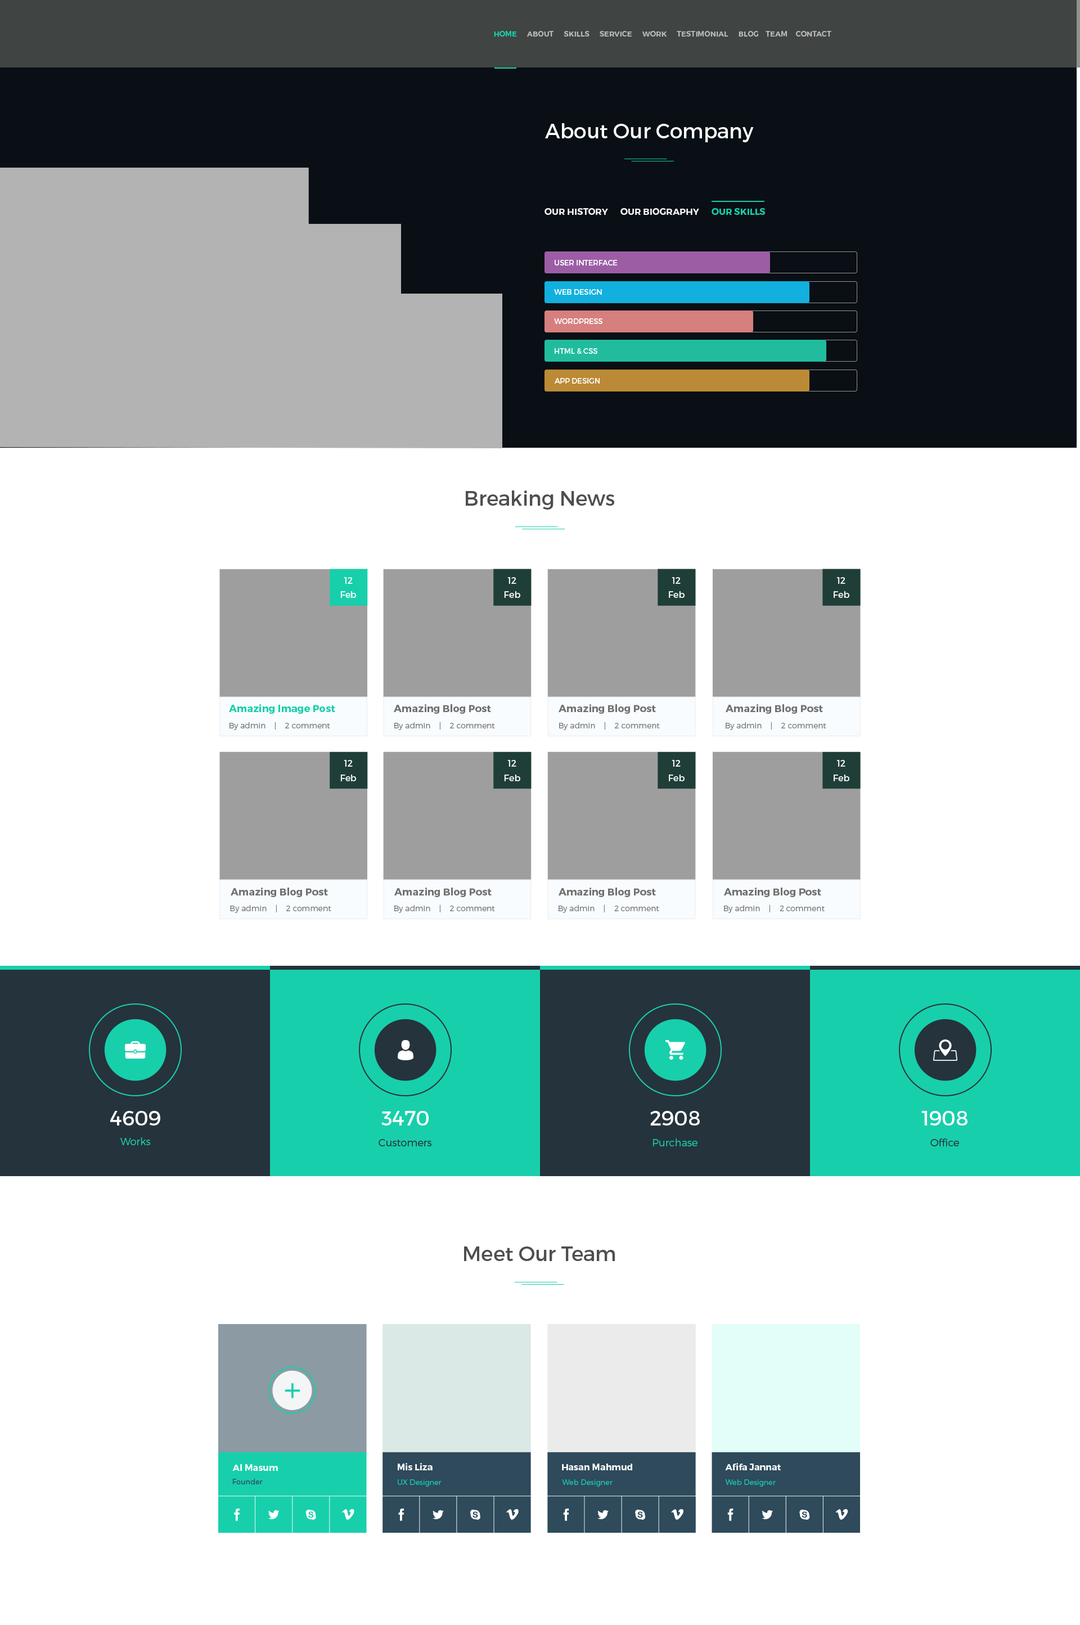
<style>
.page{position:relative;width:1080px;height:1625px;background:#ffffff}
.page>*{position:absolute;margin:0}
.t1{font:7.3px "Montserrat-Bold";color:#b8b8b8;text-transform:uppercase}
.t2{font:7.3px "Montserrat-Bold";color:#18cfab;text-transform:uppercase}
.t3{font:20.2px "Montserrat-Regular";color:#ffffff}
.t4{font:9px "Montserrat-Bold";color:#f5f5f5;text-transform:uppercase}
.t5{font:9px "Montserrat-Bold";color:#18cfab;text-transform:uppercase}
.t6{font:7.3px "Montserrat-Regular";color:#ffffff;text-transform:uppercase}
.t7{font:20.2px "Montserrat-Regular";color:#4e4e4e}
.t8{font:9px/14.2px "Montserrat-Regular";color:#ffffff}
.t9{font:10.1px "Montserrat-Bold";color:#18cfab}
.t10{font:10.1px "Montserrat-Bold";color:#717171}
.t11{font:7.9px "Montserrat-Light";color:#777777}
.t12{font:20.2px "Montserrat-Regular";color:#ffffff;text-transform:uppercase}
.t13{font:10.1px "Montserrat-Light";color:#18cfab}
.t14{font:10.1px "Montserrat-Light";color:#25333c}
.t15{font:9px "Montserrat-Bold";color:#ffffff}
.t16{font:7.3px "Montserrat-Light";color:#2e4a5b}
.t17{font:7.3px "Montserrat-Light";color:#18cfab}
</style>
<div class="page">
<p class="t1" style="left:494px;top:31px;width:337px;height:6px"><span class="t2">home      </span>about      skills      service      work      testimonial      blog    team     contact</p>
<p class="t3" style="left:545px;top:123px;width:209px;height:19px">About Our Company</p>
<p class="t4" style="left:544px;top:208px;width:221px;height:7px">our History      our Biography      <span class="t5">our Skills</span></p>
<p class="t6" style="left:555px;top:260px;width:63px;height:5px">User Interface</p>
<p class="t6" style="left:554px;top:289px;width:48px;height:6px">Web Design</p>
<p class="t6" style="left:554px;top:318px;width:48px;height:6px">Wordpress</p>
<p class="t6" style="left:555px;top:348px;width:42px;height:6px">HTML &amp; CSS</p>
<p class="t6" style="left:555px;top:378px;width:45px;height:6px">App Design</p>
<p class="t7" style="left:466px;top:490px;width:148px;height:20px">Breaking News</p>
<p class="t8" style="left:340px;top:577px;width:17px;height:21px;text-align:center">12<br>Feb</p>
<p class="t8" style="left:504px;top:577px;width:16px;height:21px;text-align:center">12<br>Feb</p>
<p class="t8" style="left:669px;top:577px;width:16px;height:21px;text-align:center">12<br>Feb</p>
<p class="t8" style="left:834px;top:577px;width:15px;height:21px;text-align:center">12<br>Feb</p>
<p class="t9" style="left:229px;top:704px;width:106px;height:10px">Amazing Image Post</p>
<p class="t10" style="left:394px;top:704px;width:97px;height:10px">Amazing Blog Post</p>
<p class="t10" style="left:559px;top:704px;width:97px;height:10px">Amazing Blog Post</p>
<p class="t10" style="left:726px;top:704px;width:97px;height:10px">Amazing Blog Post</p>
<p class="t11" style="left:229px;top:722px;width:101px;height:8px">By admin    |    2 comment</p>
<p class="t11" style="left:394px;top:722px;width:101px;height:8px">By admin    |    2 comment</p>
<p class="t11" style="left:559px;top:722px;width:101px;height:8px">By admin    |    2 comment</p>
<p class="t11" style="left:726px;top:722px;width:100px;height:8px">By admin    |    2 comment</p>
<p class="t8" style="left:340px;top:760px;width:17px;height:21px;text-align:center">12<br>Feb</p>
<p class="t8" style="left:504px;top:760px;width:16px;height:21px;text-align:center">12<br>Feb</p>
<p class="t8" style="left:669px;top:760px;width:16px;height:21px;text-align:center">12<br>Feb</p>
<p class="t8" style="left:834px;top:760px;width:15px;height:21px;text-align:center">12<br>Feb</p>
<p class="t10" style="left:231px;top:888px;width:97px;height:9px">Amazing Blog Post</p>
<p class="t10" style="left:394px;top:888px;width:98px;height:9px">Amazing Blog Post</p>
<p class="t10" style="left:559px;top:888px;width:97px;height:9px">Amazing Blog Post</p>
<p class="t10" style="left:724px;top:888px;width:97px;height:9px">Amazing Blog Post</p>
<p class="t11" style="left:230px;top:904px;width:101px;height:9px">By admin    |    2 comment</p>
<p class="t11" style="left:394px;top:904px;width:101px;height:9px">By admin    |    2 comment</p>
<p class="t11" style="left:559px;top:904px;width:100px;height:9px">By admin    |    2 comment</p>
<p class="t11" style="left:724px;top:904px;width:101px;height:9px">By admin    |    2 comment</p>
<p class="t12" style="left:110px;top:1111px;width:50px;height:15px">4609</p>
<p class="t12" style="left:381px;top:1111px;width:48px;height:15px">3470</p>
<p class="t12" style="left:650px;top:1111px;width:50px;height:15px">2908</p>
<p class="t12" style="left:921px;top:1111px;width:46px;height:15px">1908</p>
<p class="t13" style="left:120px;top:1137px;width:30px;height:8px">Works</p>
<p class="t14" style="left:379px;top:1139px;width:52px;height:7px">Customers</p>
<p class="t13" style="left:653px;top:1138px;width:44px;height:8px">Purchase</p>
<p class="t14" style="left:930px;top:1138px;width:29px;height:8px">Office</p>
<p class="t7" style="left:464px;top:1246px;width:151px;height:15px">Meet Our Team</p>
<p class="t15" style="left:232px;top:1464px;width:46px;height:7px">Al Masum</p>
<p class="t15" style="left:398px;top:1463px;width:35px;height:7px">Mis Liza</p>
<p class="t15" style="left:562px;top:1464px;width:70px;height:6px">Hasan Mahmud</p>
<p class="t15" style="left:725px;top:1463px;width:56px;height:7px">Afifa Jannat</p>
<p class="t16" style="left:233px;top:1479px;width:30px;height:5px">Founder</p>
<p class="t17" style="left:398px;top:1479px;width:44px;height:8px">UX Designer</p>
<p class="t17" style="left:562px;top:1479px;width:51px;height:8px">Web Designer</p>
<p class="t17" style="left:725px;top:1479px;width:51px;height:8px">Web Designer</p>
</div>
